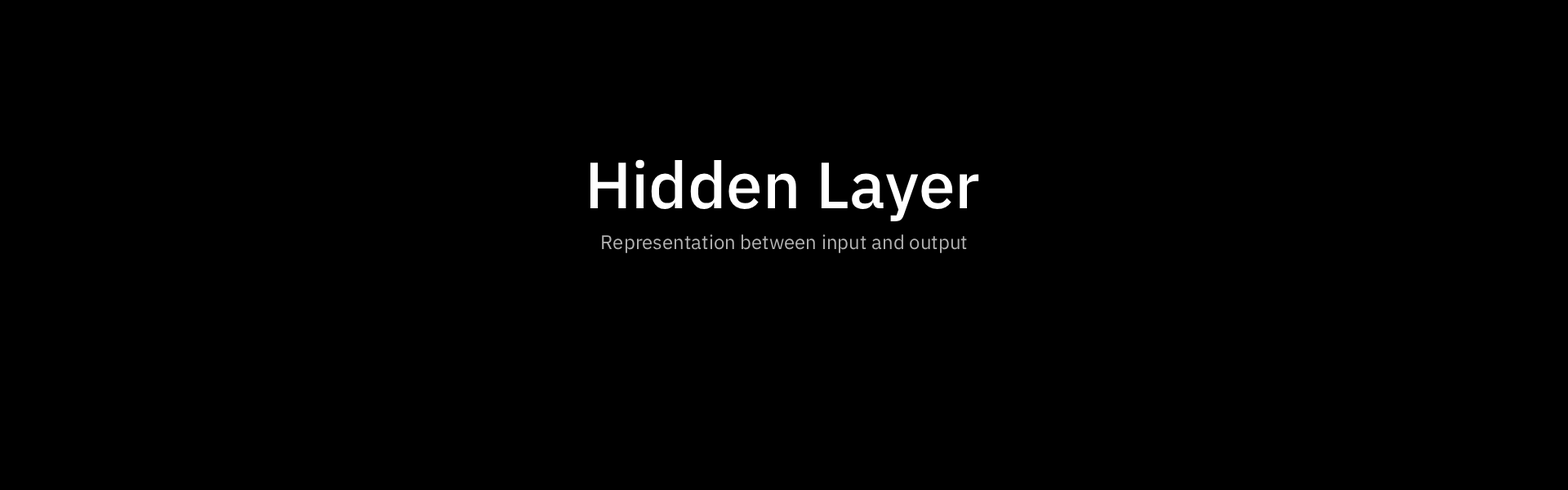
<style>
.page{position:relative;width:1568px;height:490px;background:#000000}
.page>*{position:absolute;margin:0}
.t1{font:65.2px "IBMPlexSans-Medium";color:#ffffff}
.t2{font:19.6px "IBMPlexSans-Regular";color:#b3b3b3}
</style>
<div class="page">
<p class="t1" style="left:590px;top:159px;width:389px;height:62px">Hidden Layer</p>
<p class="t2" style="left:602px;top:234px;width:365px;height:19px">Representation between input and output</p>
</div>
